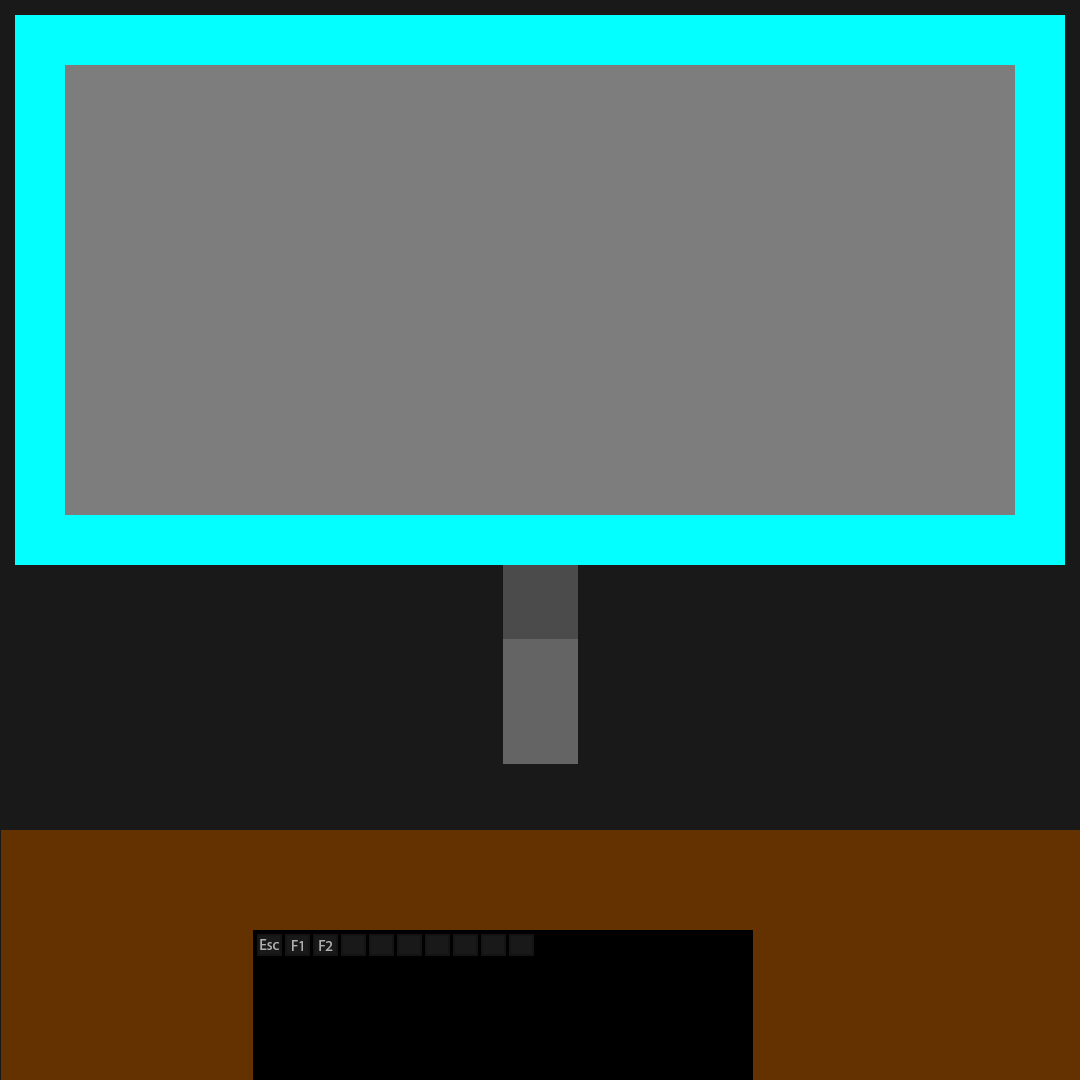
<style>
.page{position:relative;width:1080px;height:1080px;background:#7d7d7d}
.page>*{position:absolute;margin:0}
.t1{font:15px "MyriadPro-Regular";color:#afafaf}
</style>
<div class="page">
<p class="t1" style="left:260px;top:939px;width:19px;height:11px">Esc</p>
<p class="t1" style="left:292px;top:940px;width:11px;height:11px">F1</p>
<p class="t1" style="left:319px;top:940px;width:14px;height:11px">F2</p>
</div>
